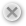
<style>
.page{position:relative;width:26px;height:26px}
.page>*{position:absolute;margin:0}
.t1{font:28.4px "ArialMT";letter-spacing:-0.05em;color:#929292}
</style>
<div class="page">
<p class="t1" style="left:6px;top:6px;width:12px;height:12px;rotate:45deg">+</p>
</div>
